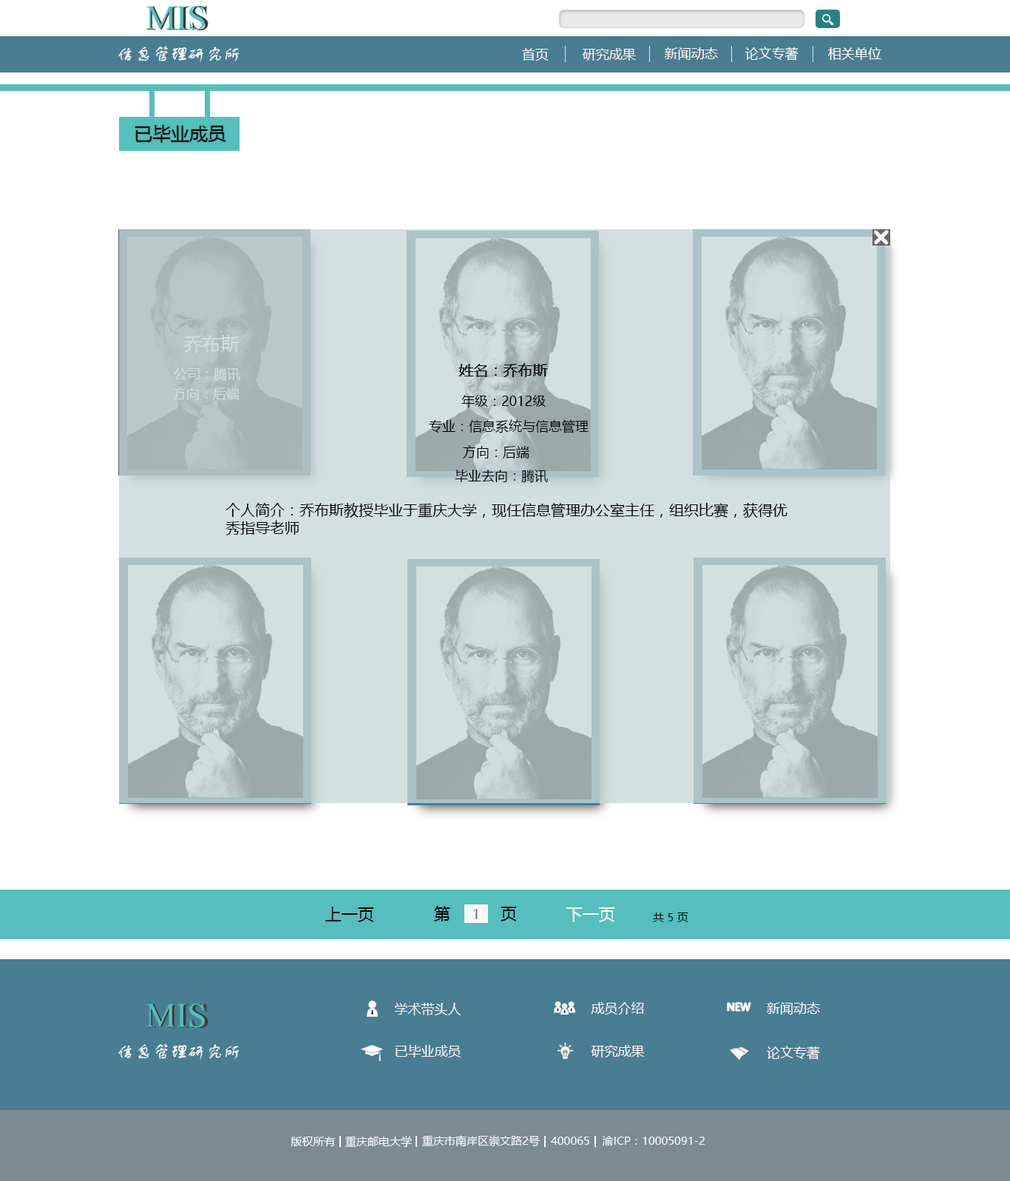
<style>
.page{position:relative;width:1010px;height:1181px;background:#ffffff}
.page>*{position:absolute;margin:0}
.t1{font:13.3px "MicrosoftYaHei";color:#fefefe}
.t2{font:13.3px "MicrosoftYaHei";color:#f8f4f4}
.t3{font:13.3px "MicrosoftYaHei";color:#fefafa}
.t4{font:13.3px "MicrosoftYaHei";color:#fcf9f9}
.t5{font:13.3px "MicrosoftYaHei";color:#fdfcfc}
.t6{font:18.5px "MicrosoftYaHei";color:#060606}
.t7{font:18.5px "MicrosoftYaHei";color:#d0dfde}
.t8{font:14.8px "MicrosoftYaHei";color:#070707}
.t9{font:13.3px "MicrosoftYaHei";color:#d0dfde}
.t10{font:13.3px "MicrosoftYaHei";color:#030303}
.t11{font:13.3px "MicrosoftYaHei";color:#050505}
.t12{font:14.8px "MicrosoftYaHei";color:#060606}
.t13{font:16.3px "MicrosoftYaHei";color:#020202}
.t14{font:16.3px "MicrosoftYaHei";color:#060606}
.t15{font:13.3px "MicrosoftYaHei";color:#686767}
.t16{font:16.3px "MicrosoftYaHei";color:#f9fafc}
.t17{font:11.1px "MicrosoftYaHei";color:#060606}
.t18{font:13.3px "MicrosoftYaHei";color:#fbf8f8}
.t19{font:13.3px "MicrosoftYaHei";color:#fcfafa}
.t20{font:13.3px "MicrosoftYaHei";color:#fdf8f8}
.t21{font:11.1px "MicrosoftYaHei";color:#f9fafc}
</style>
<div class="page">
<p class="t1" style="left:522px;top:48px;width:27px;height:13px">首页</p>
<p class="t2" style="left:582px;top:48px;width:54px;height:13px">研究成果</p>
<p class="t3" style="left:665px;top:47px;width:53px;height:13px">新闻动态</p>
<p class="t4" style="left:745px;top:47px;width:53px;height:14px">论文专著</p>
<p class="t5" style="left:828px;top:47px;width:53px;height:13px">相关单位</p>
<p class="t6" style="left:135px;top:125px;width:91px;height:18px">已毕业成员</p>
<p class="t7" style="left:183px;top:335px;width:56px;height:18px">乔布斯</p>
<p class="t8" style="left:458px;top:363px;width:90px;height:14px">姓名：乔布斯</p>
<p class="t8" style="left:458px;top:363px;width:90px;height:14px">姓名：乔布斯</p>
<p class="t9" style="left:174px;top:367px;width:66px;height:14px">公司：腾讯</p>
<p class="t9" style="left:173px;top:387px;width:67px;height:13px">方向：后端</p>
<p class="t10" style="left:461px;top:395px;width:85px;height:12px">年级：2012级</p>
<p class="t11" style="left:429px;top:419px;width:160px;height:14px">专业：信息系统与信息管理</p>
<p class="t10" style="left:463px;top:445px;width:66px;height:13px">方向：后端</p>
<p class="t10" style="left:455px;top:469px;width:93px;height:14px">毕业去向：腾讯</p>
<p class="t12" style="left:225px;top:503px;width:562px;height:32px">个人简介：乔布斯教授毕业于重庆大学，现任信息管理办公室主任，组织比赛，获得优秀指导老师</p>
<p class="t13" style="left:434px;top:906px;width:16px;height:15px">第</p>
<p class="t14" style="left:325px;top:906px;width:49px;height:16px">上一页</p>
<p class="t15" style="left:473px;top:909px;width:5px;height:10px">1</p>
<p class="t13" style="left:501px;top:906px;width:16px;height:15px">页</p>
<p class="t16" style="left:566px;top:907px;width:49px;height:15px">下一页</p>
<p class="t17" style="left:653px;top:912px;width:35px;height:10px">共 5 页</p>
<p class="t18" style="left:591px;top:1002px;width:53px;height:12px">成员介绍</p>
<p class="t19" style="left:767px;top:1002px;width:53px;height:12px">新闻动态</p>
<p class="t18" style="left:394px;top:1003px;width:67px;height:12px">学术带头人</p>
<p class="t18" style="left:395px;top:1045px;width:66px;height:12px">已毕业成员</p>
<p class="t18" style="left:591px;top:1045px;width:54px;height:12px">研究成果</p>
<p class="t20" style="left:767px;top:1045px;width:53px;height:14px">论文专著</p>
<p class="t21" style="left:291px;top:1136px;width:45px;height:10px">版权所有</p>
<p class="t21" style="left:345px;top:1136px;width:67px;height:11px">重庆邮电大学</p>
<p class="t21" style="left:422px;top:1135px;width:118px;height:12px">重庆市南岸区崇文路2号</p>
<p class="t21" style="left:551px;top:1136px;width:38px;height:8px">400065</p>
<p class="t21" style="left:602px;top:1136px;width:103px;height:9px">渝ICP：10005091-2</p>
</div>
